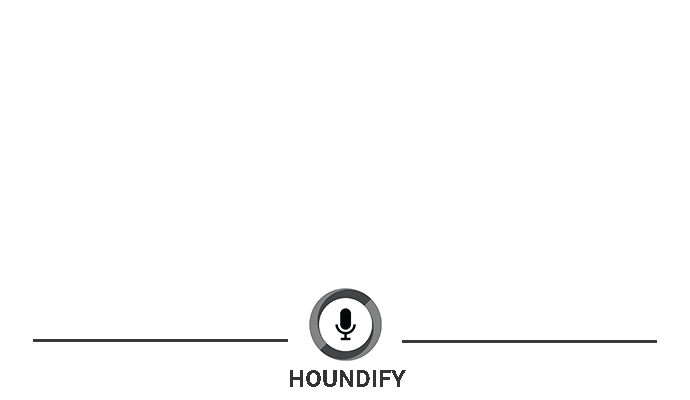
<style>
.page{position:relative;width:690px;height:400px;background:#ffffff}
.page>*{position:absolute;margin:0}
.t1{font:24px "Roboto-Bold";color:#333333}
</style>
<div class="page">
<p class="t1" style="left:290px;top:370px;width:116px;height:17px">HOUNDIFY</p>
</div>
